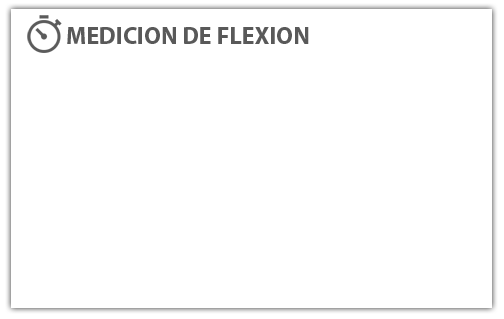
<style>
.page{position:relative;width:504px;height:319px;background:#ffffff}
.page>*{position:absolute;margin:0}
.t1{font:24px "MyriadPro-Bold";color:#595959}
</style>
<div class="page">
<p class="t1" style="left:67px;top:27px;width:242px;height:17px">MEDICION DE FLEXION</p>
</div>
